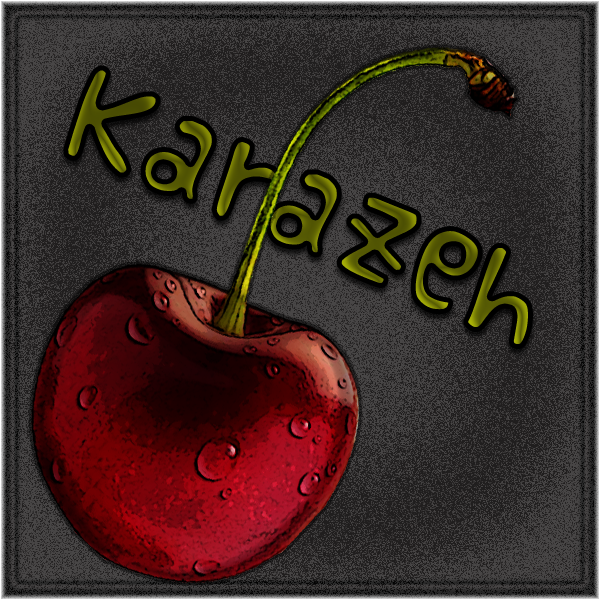
<style>
.page{position:relative;width:600px;height:600px}
.page>*{position:absolute;margin:0}
.t1{font:100px "Vanilla"}
</style>
<div class="page">
<p class="t1" style="left:63px;top:65px;width:470px;height:284px;rotate:23deg">Karazeh</p>
</div>
